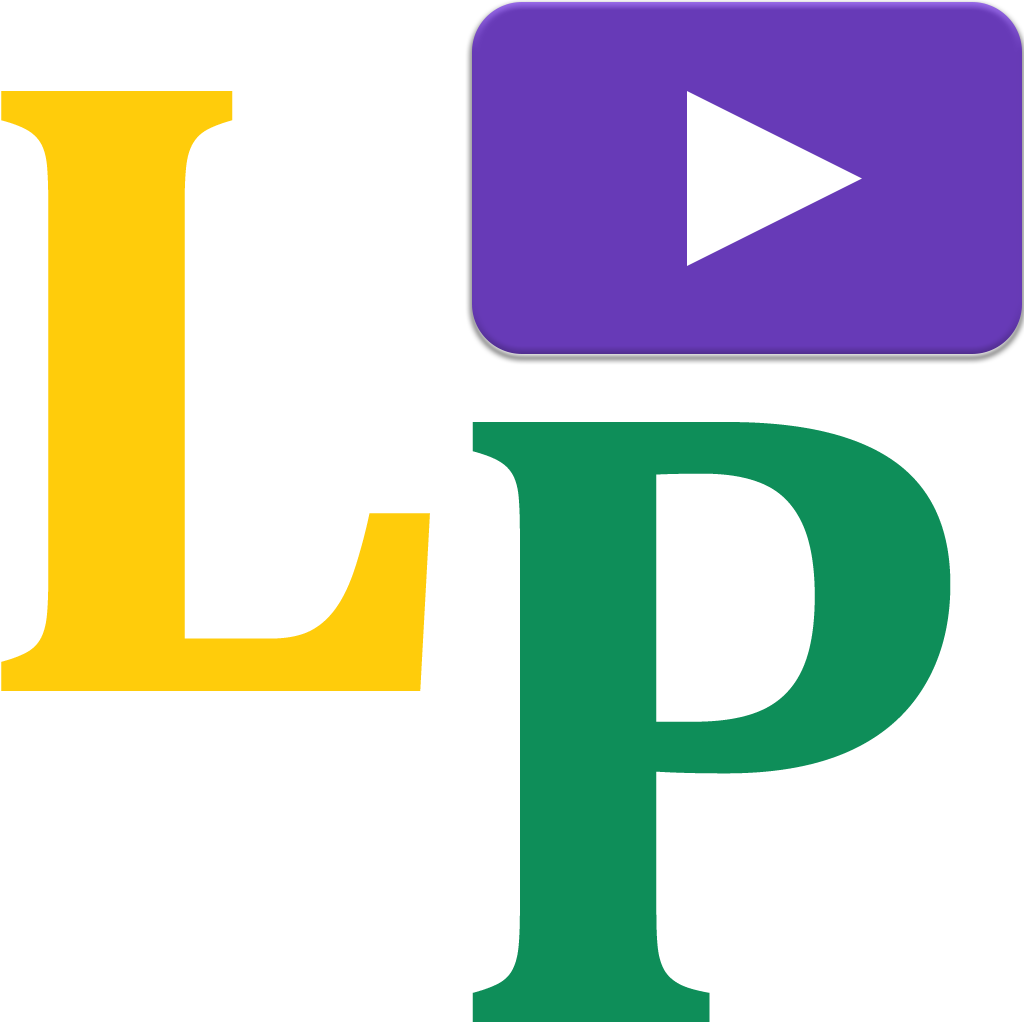
<style>
.page{position:relative;width:1024px;height:1024px;background:#ffffff}
.page>*{position:absolute;margin:0}
.t1{font:900px "Cambria-Bold";color:#ffcc0b}
.t2{font:900px "Cambria-Bold";color:#0e8e59}
</style>
<div class="page">
<p class="t1" style="left:1px;top:91px;width:429px;height:600px">L</p>
<p class="t2" style="left:472px;top:422px;width:479px;height:600px">P</p>
</div>
